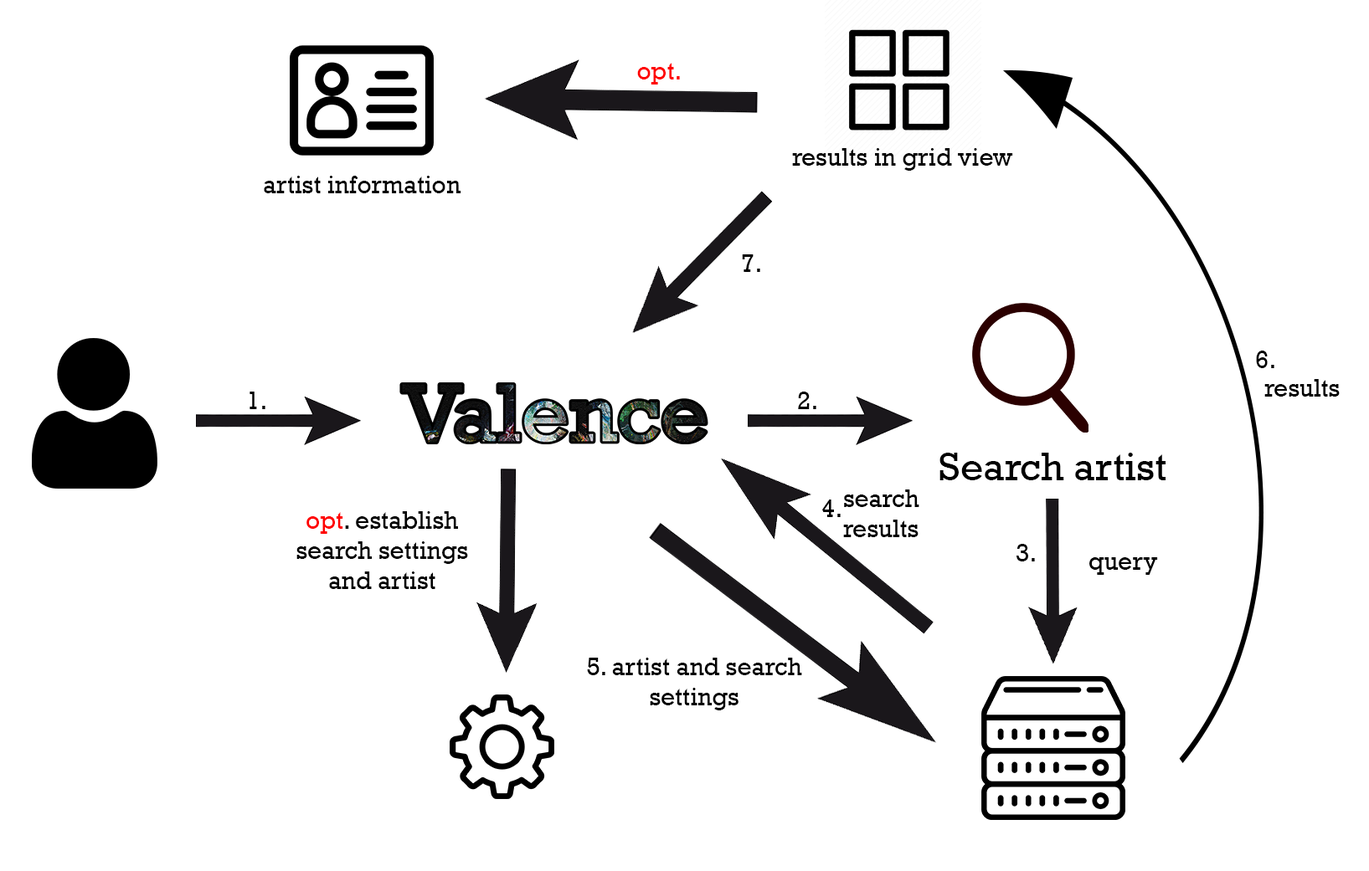
<style>
.page{position:relative;width:1369px;height:871px;background:#ffffff}
.page>*{position:absolute;margin:0}
.t1{font:25.1px "Rockwell";color:#ff0000}
.t2{font:25.1px "Rockwell";color:#000000}
.t3{font:40.2px "Rockwell";color:#000000}
</style>
<div class="page">
<p class="t1" style="left:637px;top:63px;width:43px;height:22px">opt.</p>
<p class="t2" style="left:792px;top:148px;width:221px;height:23px">results in grid view</p>
<p class="t2" style="left:264px;top:176px;width:197px;height:17px">artist information</p>
<p class="t2" style="left:742px;top:254px;width:18px;height:18px">7.</p>
<p class="t2" style="left:1256px;top:351px;width:18px;height:17px">6.</p>
<p class="t2" style="left:1264px;top:379px;width:75px;height:18px">results</p>
<p class="t2" style="left:249px;top:392px;width:16px;height:17px">1.</p>
<p class="t2" style="left:798px;top:392px;width:18px;height:17px">2.</p>
<p class="t3" style="left:939px;top:453px;width:226px;height:27px">Search artist</p>
<p class="t2" style="left:843px;top:490px;width:76px;height:47px;text-align:center">search <br>results</p>
<p class="t2" style="left:821px;top:500px;width:19px;height:17px">4.</p>
<p class="t2" style="left:296px;top:511px;width:172px;height:78px;text-align:center"><span class="t1">opt</span>. establish<br>search settings<br>and artist</p>
<p class="t2" style="left:1016px;top:544px;width:19px;height:18px">3.</p>
<p class="t2" style="left:1089px;top:557px;width:69px;height:18px">query</p>
<p class="t2" style="left:587px;top:658px;width:215px;height:53px;text-align:center">5. artist and search<br>settings</p>
</div>
